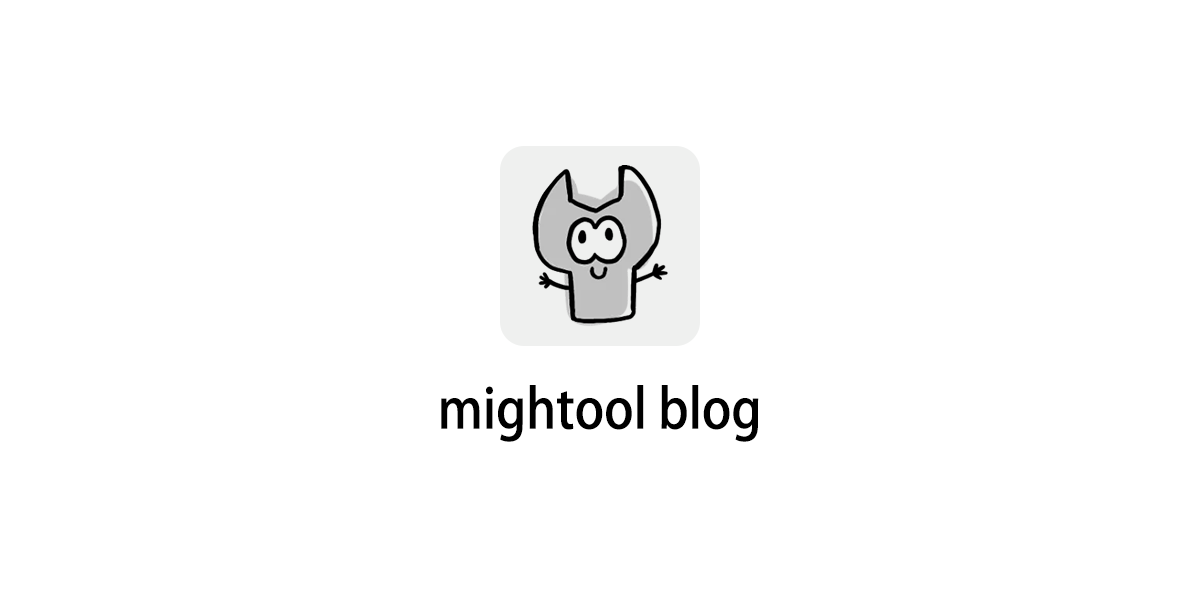
<style>
.page{position:relative;width:1200px;height:600px;background:#ffffff}
.page>*{position:absolute;margin:0}
.t1{font:54.5px "AdobeHeitiStd-Regular";color:#000000;scale:0.92 1}
</style>
<div class="page">
<p class="t1" style="left:441px;top:385px;width:318px;height:57px">mightool blog</p>
</div>
